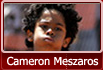
<style>
.page{position:relative;width:103px;height:70px}
.page>*{position:absolute;margin:0}
.t1{font:11px "Tahoma";color:#ffffff}
</style>
<div class="page">
<p class="t1" style="left:7px;top:56px;width:92px;height:10px">Cameron Meszaros</p>
</div>
